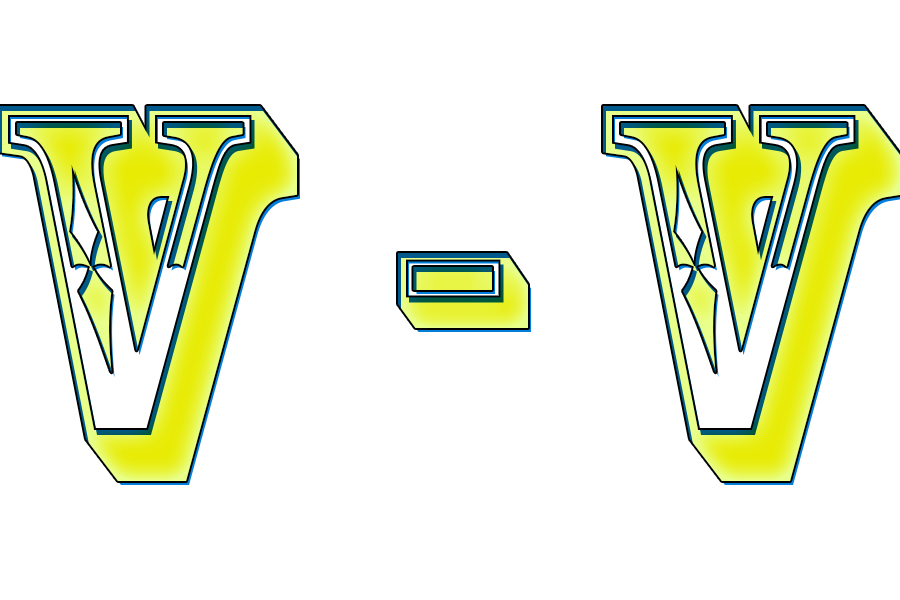
<style>
.page{position:relative;width:900px;height:600px;background:#ffffff}
.page>*{position:absolute;margin:0}
.t1{font:500px "RosewoodStd-Regular"}
</style>
<div class="page">
<p class="t1" style="left:0px;top:106px;width:901px;height:375px">V - v</p>
</div>
